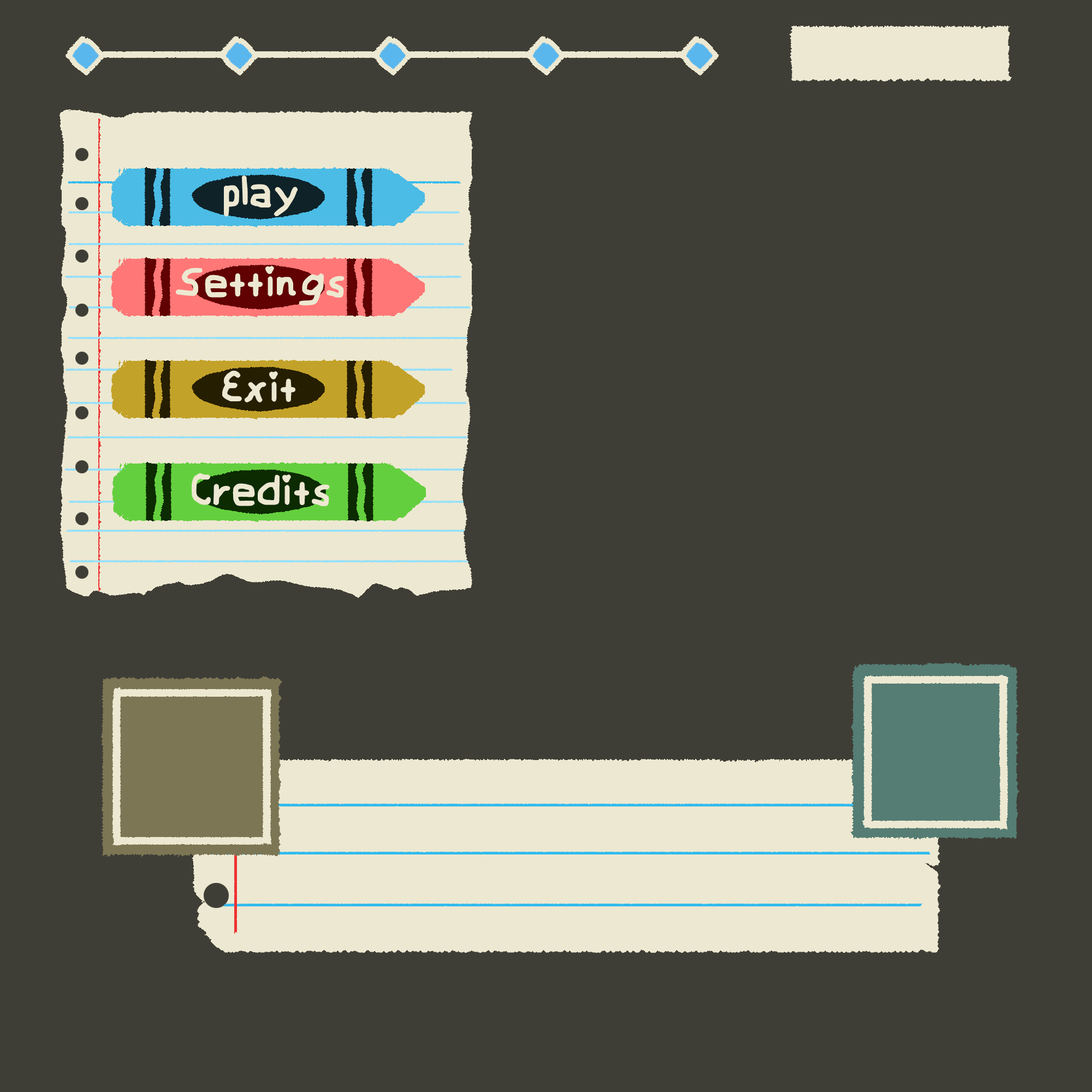
<style>
.page{position:relative;width:1092px;height:1092px;background:#3f3e36}
.page>*{position:absolute;margin:0}
.t1{font:50px "MyChildishFont";letter-spacing:0.04em;color:#ede8d1}
</style>
<div class="page">
<p class="t1" style="left:224px;top:175px;width:74px;height:42px">play</p>
<p class="t1" style="left:175px;top:266px;width:170px;height:40px">Settings</p>
<p class="t1" style="left:222px;top:371px;width:73px;height:31px">Exit</p>
<p class="t1" style="left:192px;top:473px;width:138px;height:33px">Credits</p>
</div>
